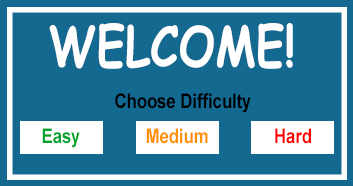
<style>
.page{position:relative;width:353px;height:186px;background:#146991}
.page>*{position:absolute;margin:0}
.t1{font:55px "ComicSansMS-Bold";color:#ffffff;scale:0.83 1}
.t2{font:20px "Arial-BoldMT";color:#000000;scale:0.83 1}
.t3{font:20px "Arial-BoldMT";color:#00a22a;scale:0.83 1}
.t4{font:20px "Arial-BoldMT";color:#ff9000;scale:0.83 1}
.t5{font:20px "Arial-BoldMT";color:#ff0000;scale:0.83 1}
</style>
<div class="page">
<p class="t1" style="left:49px;top:23px;width:244px;height:46px">WELCOME!</p>
<p class="t2" style="left:115px;top:93px;width:136px;height:20px">Choose Difficulty</p>
<p class="t3" style="left:42px;top:128px;width:38px;height:20px">Easy</p>
<p class="t4" style="left:146px;top:128px;width:62px;height:16px">Medium</p>
<p class="t5" style="left:275px;top:128px;width:36px;height:16px">Hard</p>
</div>
